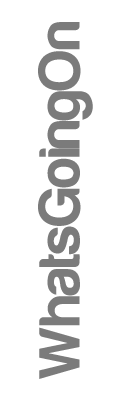
<style>
.page{position:relative;width:120px;height:400px;background:#ffffff}
.page>*{position:absolute;margin:0}
.t1{font:60px "Harabara-Bold";color:#7b7b7b}
</style>
<div class="page">
<p class="t1" style="left:38px;top:22px;width:55px;height:357px;rotate:-90deg">WhatsGoingOn</p>
</div>
